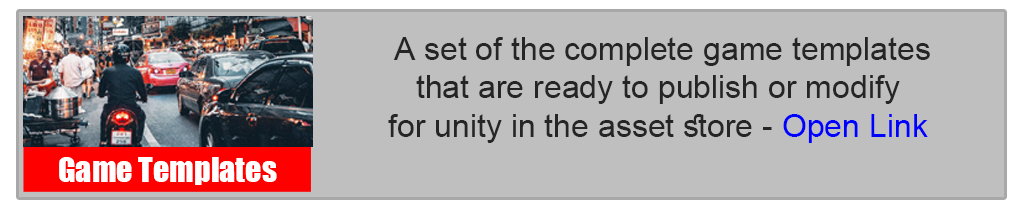
<style>
.page{position:relative;width:1024px;height:210px;background:#bfbfbf}
.page>*{position:absolute;margin:0}
.t1{font:32px "ArialMT";color:#252525}
.t2{font:32px "ArialMT";color:#0000ff}
.t3{font:32px "Impact";color:#ffffff}
</style>
<div class="page">
<p class="t1" style="left:388px;top:37px;width:542px;height:106px;text-align:center">A set of the complete game templates <br>that are ready to publish or modify<br>for unity in the asset store - <span class="t2">Open Link</span></p>
<p class="t3" style="left:59px;top:157px;width:218px;height:28px">Game Templates</p>
</div>
